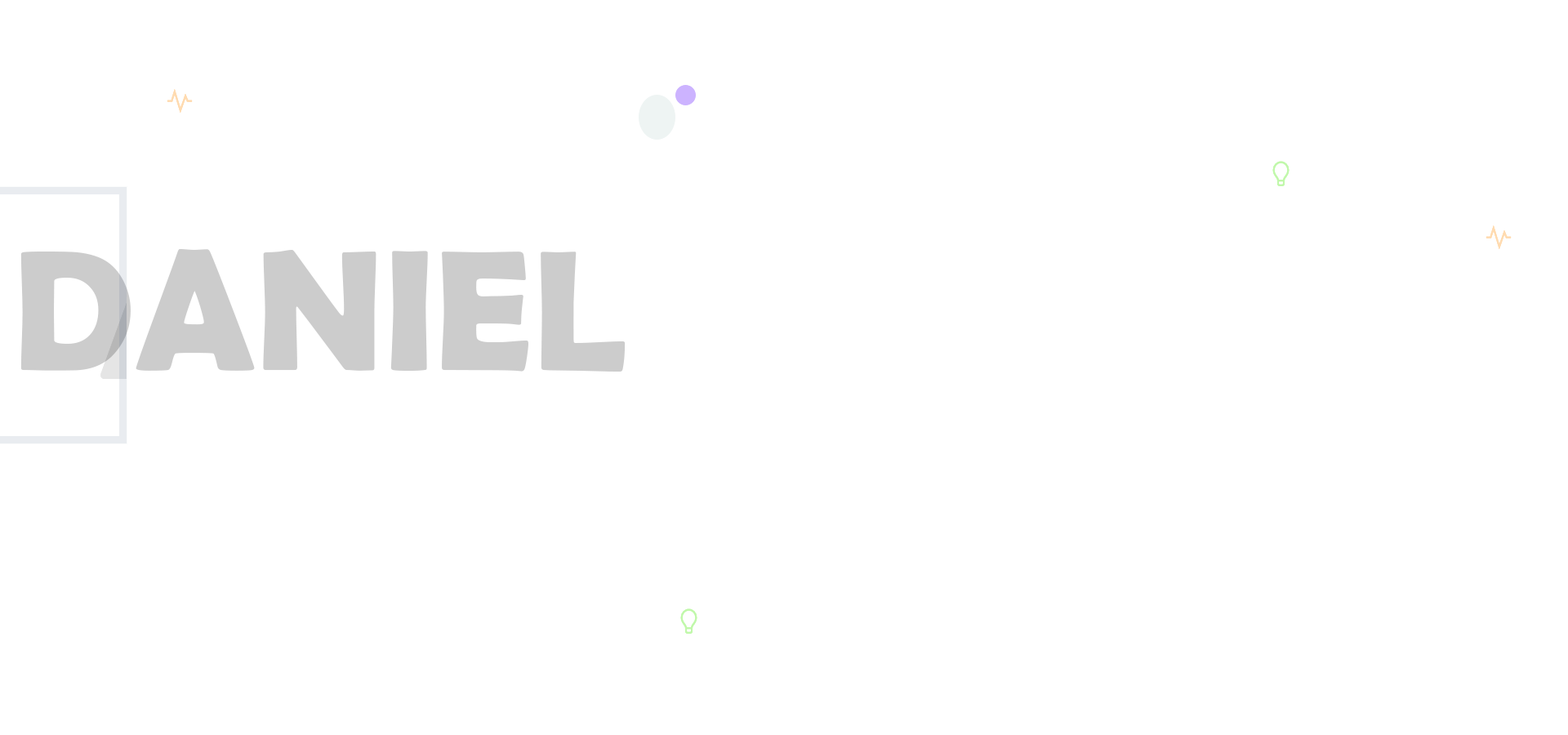
<style>
.page{position:relative;width:1568px;height:735px;background:#ffffff}
.page>*{position:absolute;margin:0}
.t1{font:172.8px "BerlinSansFBDemi-Bold";color:#cccccc}
</style>
<div class="page">
<p class="t1" style="left:20px;top:248px;width:606px;height:124px">DANIEL</p>
</div>
